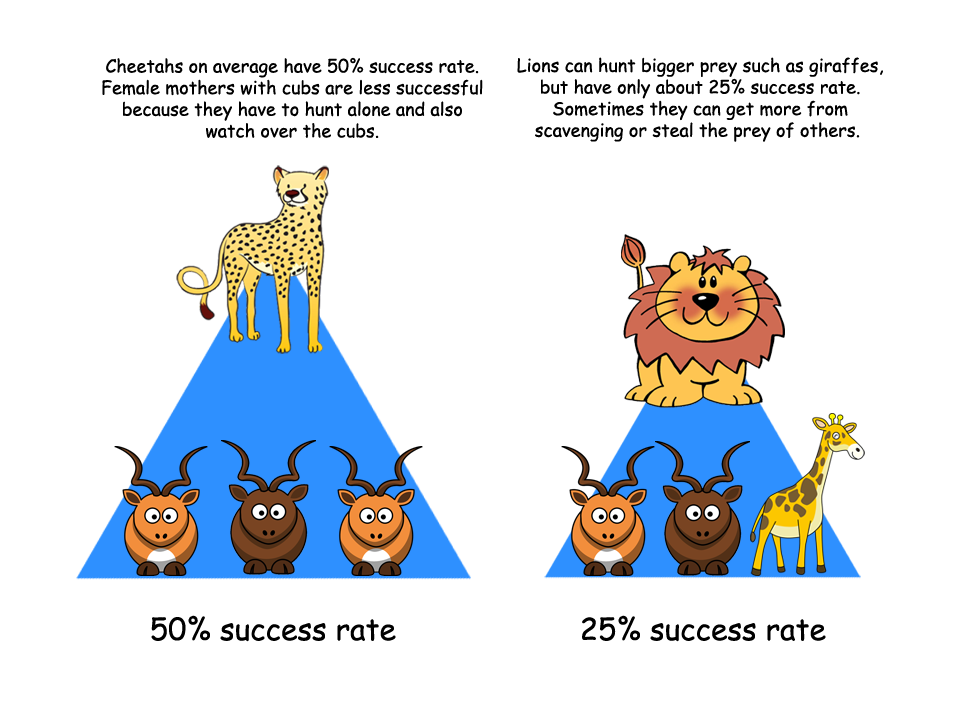
<style>
.page{position:relative;width:960px;height:720px;background:#ffffff}
.page>*{position:absolute;margin:0}
.t1{font:18px "ComicSansMS";color:#000000}
.t2{font:30px "ComicSansMS";color:#000000}
</style>
<div class="page">
<p class="t1" style="left:102px;top:57px;width:381px;height:81px;text-align:center">Cheetahs on average have 50% success rate.<br>Female mothers with cubs are less successful<br>because they have to hunt alone and also<br>watch over the cubs.</p>
<p class="t1" style="left:517px;top:57px;width:366px;height:85px;text-align:center">Lions can hunt bigger prey such as giraffes,<br>but have only about 25% success rate.<br>Sometimes they can get more from<br>scavenging or steal the prey of others.</p>
<p class="t2" style="left:151px;top:615px;width:245px;height:27px">50% success rate</p>
<p class="t2" style="left:582px;top:615px;width:244px;height:27px">25% success rate</p>
</div>
